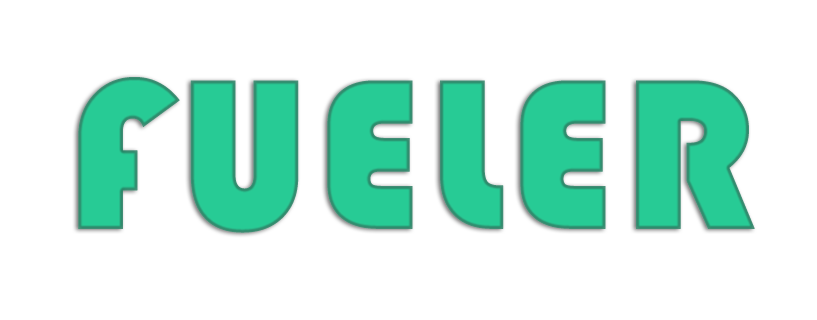
<style>
.page{position:relative;width:817px;height:320px;background:#ffffff}
.page>*{position:absolute;margin:0}
.t1{font:221.6px "Bauhaus93";color:#27cb95;font-weight:bold}
</style>
<div class="page">
<p class="t1" style="left:78px;top:77px;width:677px;height:156px">FUELER</p>
</div>
